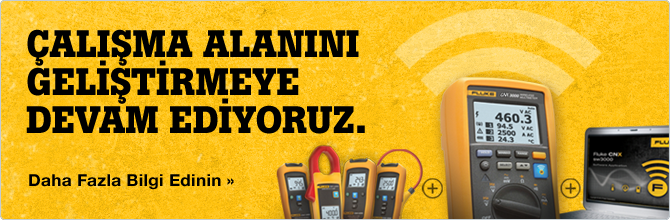
<style>
.page{position:relative;width:670px;height:220px}
.page>*{position:absolute;margin:0}
.t1{font:38px/38px "BotonPro-Bold";letter-spacing:-0.005em;color:#000000;text-transform:uppercase}
.t2{font:16.5px "HelveticaNeueLTCYR-Bd";letter-spacing:0.018em;color:#000000;scale:1.04 1}
</style>
<div class="page">
<p class="t1" style="left:26px;top:29px;width:339px;height:105px">Çalışma alanını <br>GELİŞTİRMEYE <br>devam EDİYORUZ.</p>
<p class="t2" style="left:29px;top:174px;width:205px;height:16px">Daha Fazla Bilgi Edinin »</p>
</div>
